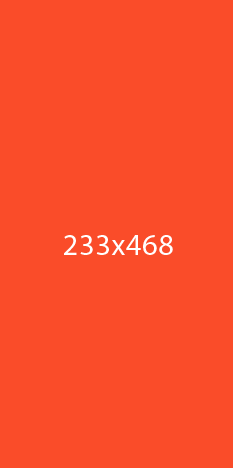
<style>
.page{position:relative;width:233px;height:468px;background:#fa4c29}
.page>*{position:absolute;margin:0}
.t1{font:30px "MyriadPro-Regular";letter-spacing:0.025em;color:#ffffff}
</style>
<div class="page">
<p class="t1" style="left:64px;top:235px;width:109px;height:20px">233x468</p>
</div>
